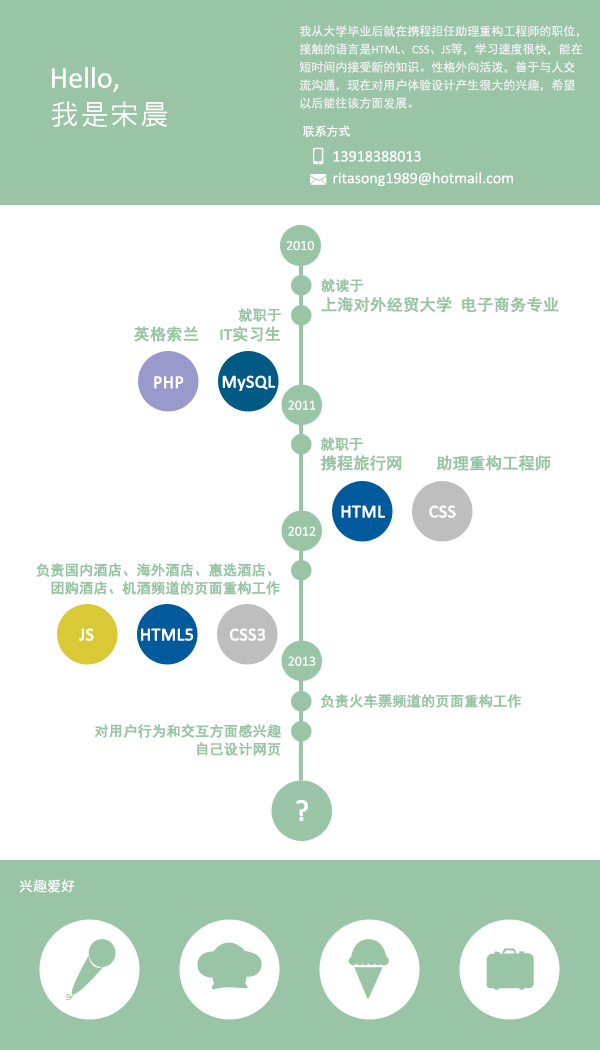
<style>
.page{position:relative;width:600px;height:1050px;background:#ffffff}
.page>*{position:absolute;margin:0}
.t1{font:12px/18px "SimHei";color:#efefef}
.t2{font:12px/18px "Calibri";color:#efefef}
.t3{font:30px/36px "Calibri";color:#ffffff}
.t4{font:30px/36px "¥þ¯u¤¤²Ó¶ÂÅé";color:#ffffff}
.t5{font:12px "SimHei";color:#ffffff}
.t6{font:16px "Calibri";color:#ffffff}
.t7{font:14px "Calibri";color:#ffffff}
.t8{font:16px/18px "SimHei";color:#99c5a6;font-weight:bold}
.t9{font:14px/18px "SimHei";color:#99c5a6;font-weight:bold}
.t10{font:16px/18px "Calibri";color:#99c5a6;font-weight:bold}
.t11{font:18px "Calibri";color:#ffffff;font-weight:bold}
.t12{font:14px "SimHei";color:#99c5a6;font-weight:bold}
.t13{font:30px "Calibri";color:#ffffff;font-weight:bold}
.t14{font:14px "SimHei";color:#ffffff}
</style>
<div class="page">
<p class="t1" style="left:299px;top:25px;width:283px;height:84px">我从大学毕业后就在携程担任助理重构工程师的职位，<br>接触的语言是<span class="t2">HTML</span>、<span class="t2">CSS</span>、<span class="t2">JS</span>等，学习速度很快，能在<br>短时间内接受新的知识。性格外向活泼，善于与人交<br>流沟通，现在对用户体验设计产生很大的兴趣，希望<br>以后能往该方面发展。</p>
<p class="t3" style="left:51px;top:67px;width:117px;height:61px">Hello,<br><span class="t4">我是宋晨</span></p>
<p class="t5" style="left:303px;top:125px;width:48px;height:12px">联系方式</p>
<p class="t6" style="left:333px;top:151px;width:88px;height:11px">13918388013</p>
<p class="t6" style="left:333px;top:172px;width:180px;height:15px">ritasong1989@hotmail.com</p>
<p class="t7" style="left:286px;top:241px;width:28px;height:10px">2010</p>
<p class="t8" style="left:321px;top:278px;width:238px;height:35px"><span class="t9">就读于<br></span>上海对外经贸大学 电子商务专业</p>
<p class="t8" style="left:134px;top:308px;width:147px;height:34px;text-align:right"><span class="t9">就职于<br></span>英格索兰<span class="t10">     IT</span>实习生</p>
<p class="t11" style="left:154px;top:376px;width:30px;height:13px">PHP</p>
<p class="t11" style="left:222px;top:375px;width:54px;height:16px">MySQL</p>
<p class="t7" style="left:288px;top:400px;width:28px;height:10px">2011</p>
<p class="t8" style="left:320px;top:437px;width:231px;height:34px"><span class="t9">就职于<br></span>携程旅行网    助理重构工程师</p>
<p class="t11" style="left:341px;top:505px;width:115px;height:13px">HTML          CSS</p>
<p class="t7" style="left:288px;top:526px;width:28px;height:10px">2012</p>
<p class="t9" style="left:36px;top:563px;width:244px;height:32px;text-align:right">负责国内酒店、海外酒店、惠选酒店、<br>团购酒店、机酒频道的页面重构工作</p>
<p class="t11" style="left:79px;top:628px;width:187px;height:13px">JS          HTML5        CSS3</p>
<p class="t7" style="left:288px;top:656px;width:28px;height:10px">2013</p>
<p class="t12" style="left:321px;top:694px;width:200px;height:14px">负责火车票频道的页面重构工作</p>
<p class="t9" style="left:94px;top:724px;width:187px;height:32px;text-align:right">对用户行为和交互方面感兴趣<br>自己设计网页</p>
<p class="t13" style="left:296px;top:799px;width:12px;height:23px">?</p>
<p class="t14" style="left:19px;top:879px;width:56px;height:14px">兴趣爱好</p>
</div>
